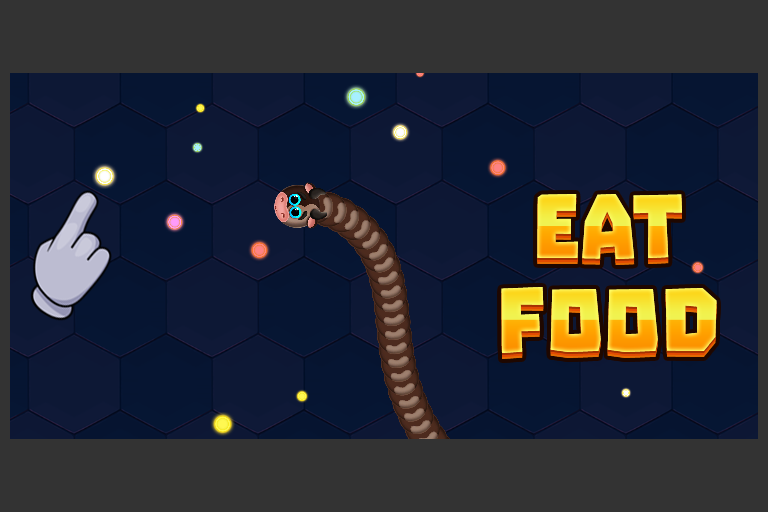
<style>
.page{position:relative;width:768px;height:512px;background:#333333}
.page>*{position:absolute;margin:0}
.t1{font:101.3px "Troika"}
</style>
<div class="page">
<p class="t1" style="left:537px;top:194px;width:145px;height:65px">EAT</p>
<p class="t1" style="left:501px;top:287px;width:216px;height:66px">FOOD</p>
</div>
